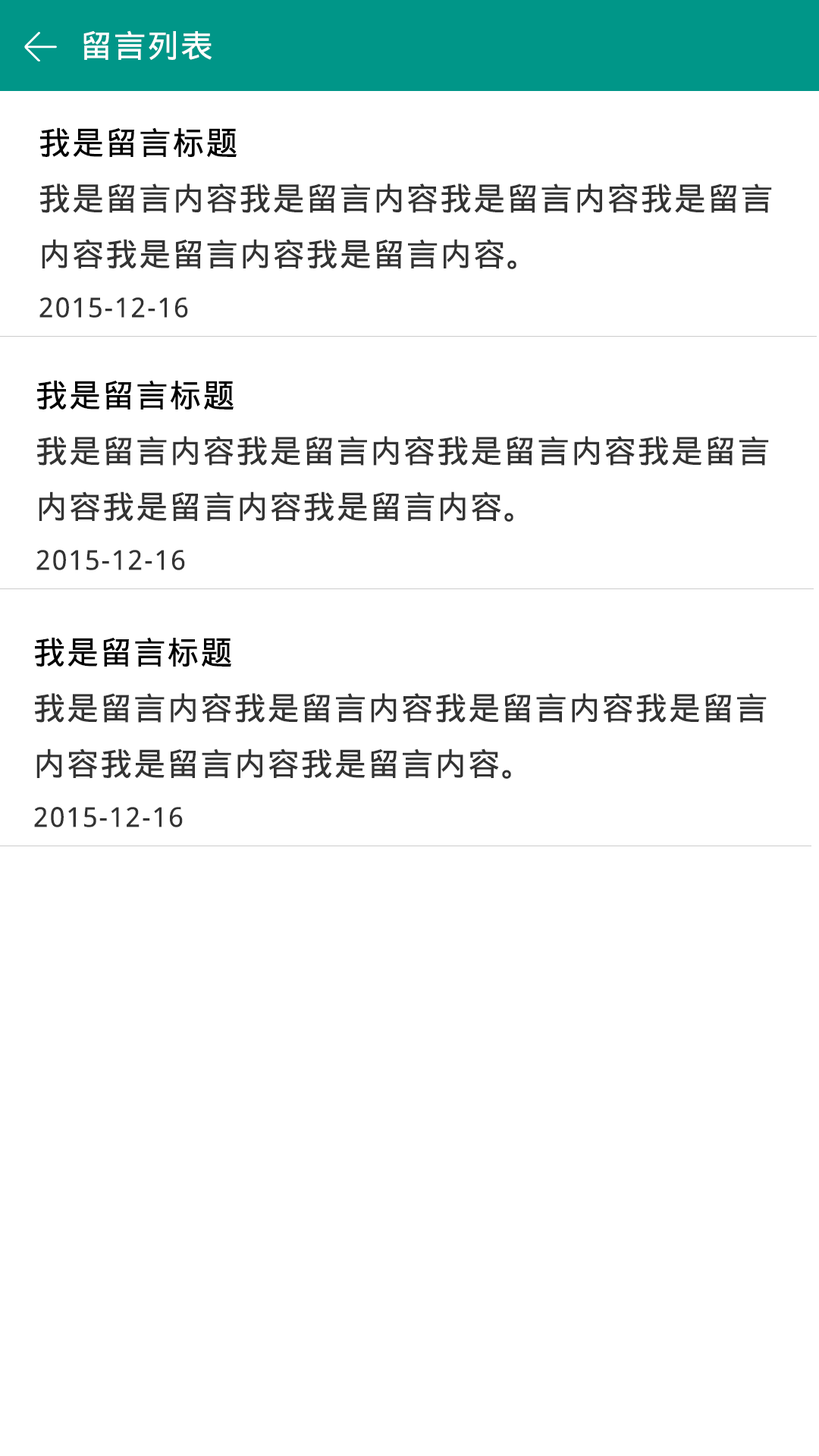
<style>
.page{position:relative;width:819px;height:1456px;background:#ffffff}
.page>*{position:absolute;margin:0}
.t1{font:31.8px "DroidSansFallback";letter-spacing:0.05em;color:#ffffff}
.t2{font:31.8px "DroidSansFallback";letter-spacing:0.05em;color:#333333}
.t3{font:31.8px "DroidSansFallback";letter-spacing:0.05em;color:#000000}
.t4{font:27.3px "DroidSansFallback";letter-spacing:0.05em;color:#333333}
</style>
<div class="page">
<p class="t1" style="left:83px;top:30px;width:129px;height:30px">留言列表</p>
<p class="t2" style="left:39px;top:127px;width:733px;height:191px"><span class="t3">我是留言标题<br></span>我是留言内容我是留言内容我是留言内容我是留言<br>内容我是留言内容我是留言内容。<br><span class="t4">2015-12-16</span></p>
<p class="t2" style="left:36px;top:380px;width:733px;height:190px"><span class="t3">我是留言标题<br></span>我是留言内容我是留言内容我是留言内容我是留言<br>内容我是留言内容我是留言内容。<br><span class="t4">2015-12-16</span></p>
<p class="t2" style="left:34px;top:637px;width:733px;height:190px"><span class="t3">我是留言标题<br></span>我是留言内容我是留言内容我是留言内容我是留言<br>内容我是留言内容我是留言内容。<br><span class="t4">2015-12-16</span></p>
</div>
